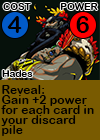
<style>
.page{position:relative;width:100px;height:140px;background:#795b01}
.page>*{position:absolute;margin:0}
.t1{font:9.7px "ArialRoundedMTBold";letter-spacing:0.01em;color:#000000}
.t2{font:24px "ArialRoundedMTBold";letter-spacing:0.01em;color:#000000}
.t3{font:12px/10px "ArialRoundedMTBold";letter-spacing:0.01em;color:#000000}
</style>
<div class="page">
<p class="t1" style="left:3px;top:3px;width:28px;height:7px">COST</p>
<p class="t1" style="left:60px;top:3px;width:38px;height:7px">POWER</p>
<p class="t2" style="left:7px;top:16px;width:15px;height:17px">4</p>
<p class="t2" style="left:76px;top:16px;width:13px;height:17px">6</p>
<p class="t1" style="left:2px;top:70px;width:31px;height:7px">Hades</p>
<p class="t3" style="left:1px;top:85px;width:93px;height:51px">Reveal:<br>Gain +2 power<br>for each card in<br>your discard <br>pile</p>
</div>
